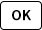
<style>
.page{position:relative;width:42px;height:30px;background:#ffffff}
.page>*{position:absolute;margin:0}
.t1{font:15px "SourceSansPro-Regular";color:#000000;text-transform:uppercase;font-weight:bold}
</style>
<div class="page">
<p class="t1" style="left:12px;top:10px;width:19px;height:11px">ok</p>
</div>
